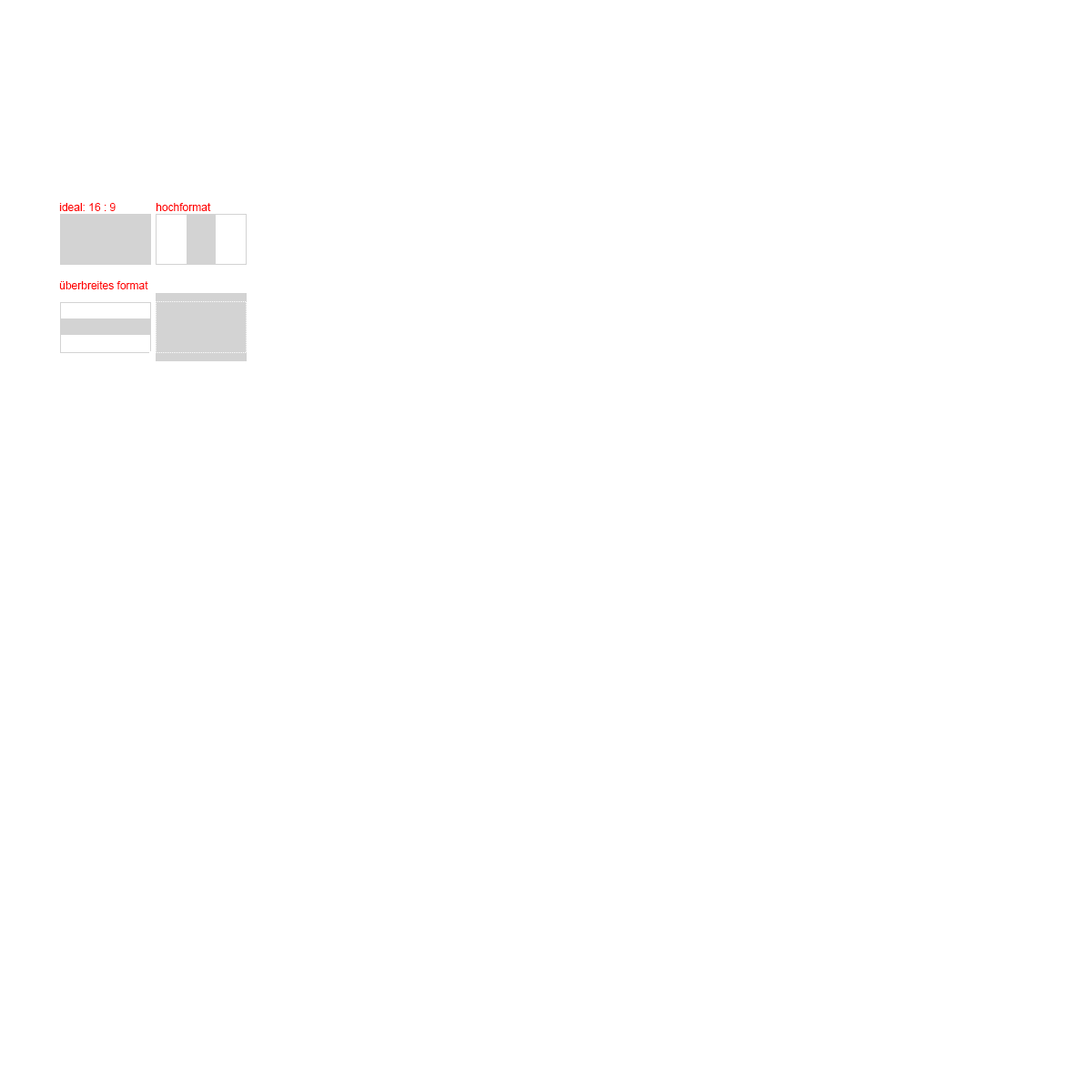
<style>
.page{position:relative;width:1092px;height:1092px;background:#ffffff}
.page>*{position:absolute;margin:0}
.t1{font:10.9px "ArialMT";color:#ff0000}
</style>
<div class="page">
<p class="t1" style="left:59px;top:203px;width:57px;height:8px">ideal: 16 : 9</p>
<p class="t1" style="left:156px;top:203px;width:55px;height:8px">hochformat</p>
<p class="t1" style="left:59px;top:281px;width:89px;height:8px">überbreites format</p>
</div>
